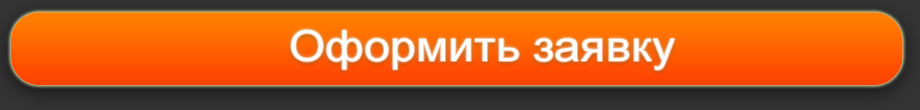
<style>
.page{position:relative;width:920px;height:110px}
.page>*{position:absolute;margin:0}
.t1{font:42.8px "ArialMT";color:#ffffff;scale:1.09 1}
</style>
<div class="page">
<p class="t1" style="left:291px;top:29px;width:384px;height:41px">Оформить заявку</p>
</div>
